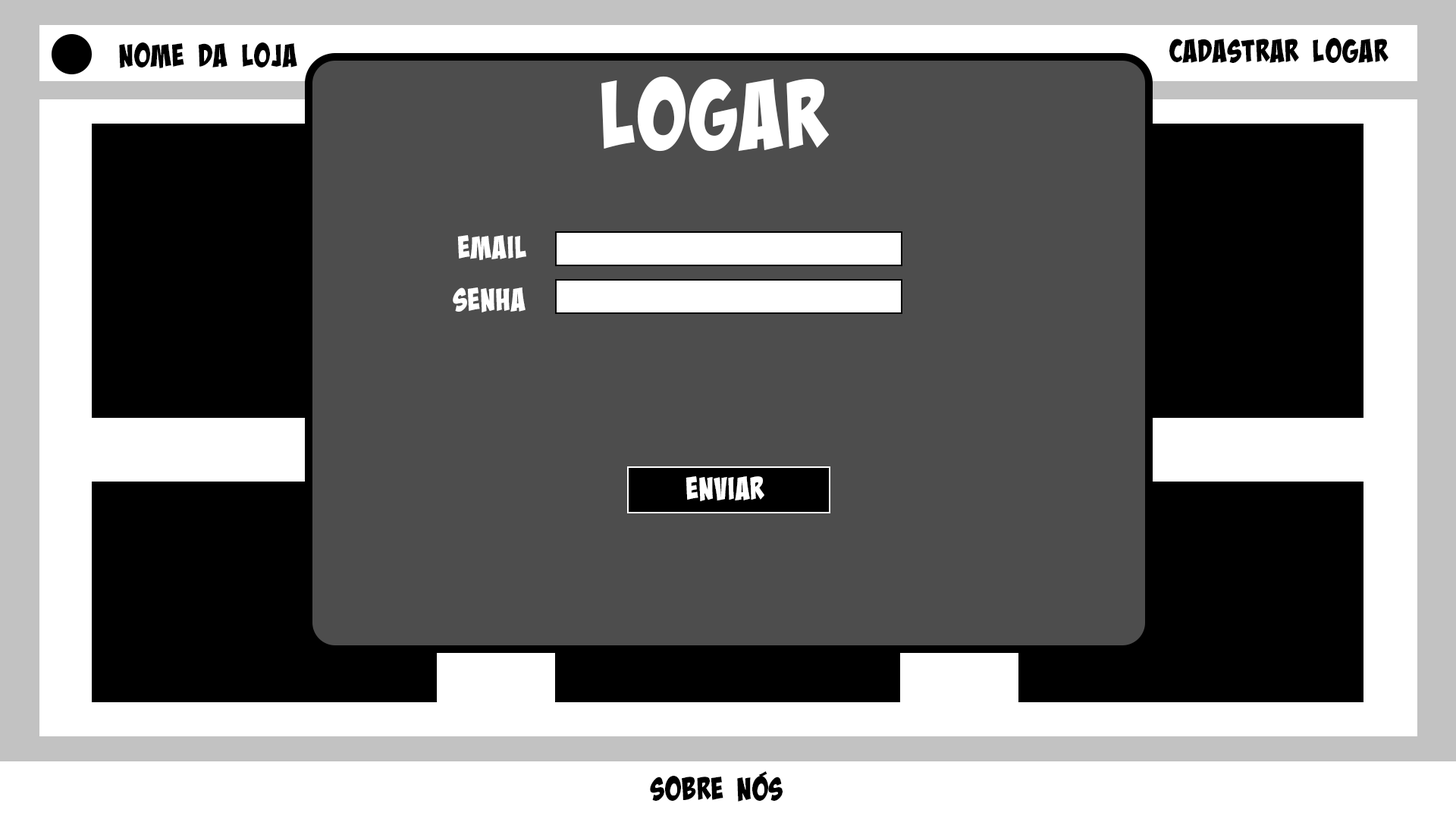
<style>
.page{position:relative;width:1456px;height:819px;background:#4d4d4d}
.page>*{position:absolute;margin:0}
.t1{font:31.6px "BadaBoomProBB";color:#000000}
.t2{font:94.8px "BadaBoomProBB";color:#ffffff}
.t3{font:31.6px "BadaBoomProBB";color:#ffffff}
</style>
<div class="page">
<p class="t1" style="left:1169px;top:38px;width:219px;height:25px">Cadastrar Logar</p>
<p class="t1" style="left:119px;top:42px;width:178px;height:26px">NOME DA LOJA</p>
<p class="t2" style="left:601px;top:76px;width:229px;height:76px">Logar</p>
<p class="t3" style="left:457px;top:235px;width:69px;height:25px">Email</p>
<p class="t3" style="left:453px;top:287px;width:73px;height:25px">Senha</p>
<p class="t3" style="left:686px;top:476px;width:78px;height:25px">Enviar</p>
<p class="t1" style="left:650px;top:771px;width:133px;height:31px">Sobre nós</p>
</div>
